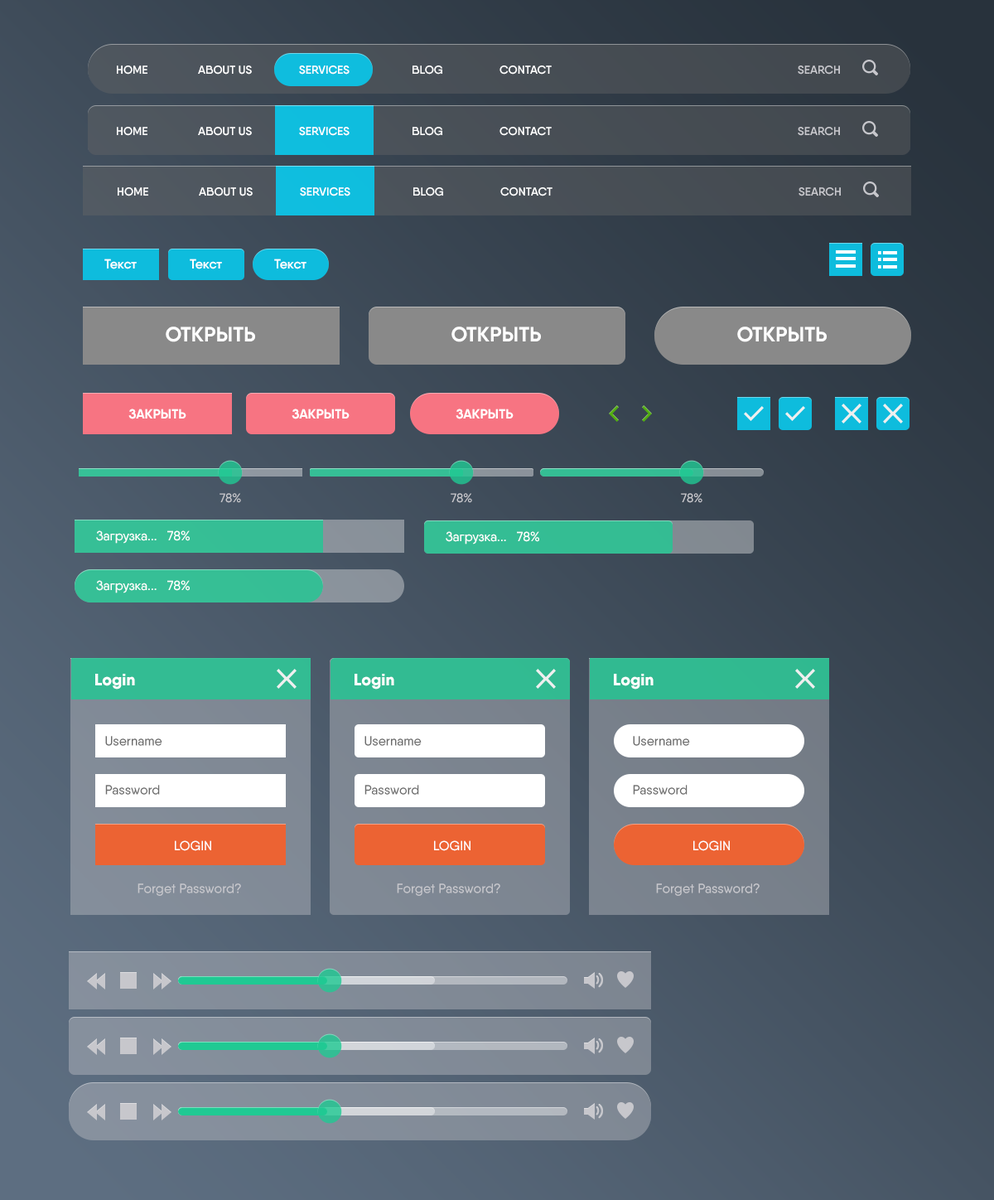
<style>
.page{position:relative;width:994px;height:1200px}
.page>*{position:absolute;margin:0}
.t1{font:11.6px "Qanelas-SemiBold";color:#ffffff;text-transform:uppercase}
.t2{font:11.6px "Qanelas-SemiBold";color:#c7c7cc;text-transform:uppercase}
.t3{font:13.3px "Qanelas-SemiBold";color:#ffffff}
.t4{font:20.7px "Qanelas-Bold";color:#ffffff;text-transform:uppercase}
.t5{font:13.3px "Qanelas-Bold";color:#ffffff;text-transform:uppercase}
.t6{font:12.4px "Qanelas-Medium";color:#c7c7cc}
.t7{font:13.3px "Qanelas-Medium";color:#ffffff}
.t8{font:16.6px "Qanelas-ExtraBold";color:#ffffff}
.t9{font:13.3px "Qanelas-Medium";color:#6c6c6c}
.t10{font:13.3px "Qanelas-Medium";color:#ffffff;text-transform:uppercase}
.t11{font:13.3px "Qanelas-Medium";color:#c7c7cc}
</style>
<div class="page">
<p class="t1" style="left:117px;top:65px;width:30px;height:10px">HOME</p>
<p class="t1" style="left:198px;top:65px;width:54px;height:10px">about us</p>
<p class="t1" style="left:299px;top:65px;width:51px;height:10px">services</p>
<p class="t1" style="left:413px;top:65px;width:29px;height:10px">blog</p>
<p class="t1" style="left:500px;top:65px;width:52px;height:10px">contact</p>
<p class="t2" style="left:798px;top:65px;width:42px;height:10px">search</p>
<p class="t1" style="left:117px;top:127px;width:30px;height:9px">HOME</p>
<p class="t1" style="left:198px;top:127px;width:54px;height:9px">about us</p>
<p class="t1" style="left:299px;top:127px;width:51px;height:9px">services</p>
<p class="t1" style="left:413px;top:127px;width:29px;height:9px">blog</p>
<p class="t1" style="left:500px;top:127px;width:52px;height:9px">contact</p>
<p class="t2" style="left:798px;top:127px;width:42px;height:9px">search</p>
<p class="t1" style="left:118px;top:187px;width:30px;height:9px">HOME</p>
<p class="t1" style="left:199px;top:187px;width:54px;height:9px">about us</p>
<p class="t1" style="left:300px;top:187px;width:50px;height:9px">services</p>
<p class="t1" style="left:413px;top:187px;width:30px;height:9px">blog</p>
<p class="t1" style="left:500px;top:187px;width:53px;height:9px">contact</p>
<p class="t2" style="left:799px;top:187px;width:42px;height:9px">search</p>
<p class="t3" style="left:104px;top:258px;width:33px;height:11px">Текст</p>
<p class="t3" style="left:190px;top:258px;width:32px;height:11px">Текст</p>
<p class="t3" style="left:274px;top:258px;width:33px;height:11px">Текст</p>
<p class="t4" style="left:166px;top:326px;width:89px;height:16px">открыть</p>
<p class="t4" style="left:451px;top:326px;width:90px;height:16px">открыть</p>
<p class="t4" style="left:737px;top:326px;width:90px;height:16px">открыть</p>
<p class="t5" style="left:128px;top:408px;width:58px;height:11px">закрыть</p>
<p class="t5" style="left:292px;top:408px;width:58px;height:11px">закрыть</p>
<p class="t5" style="left:456px;top:408px;width:58px;height:11px">закрыть</p>
<p class="t6" style="left:220px;top:493px;width:21px;height:10px">78%</p>
<p class="t6" style="left:451px;top:493px;width:21px;height:10px">78%</p>
<p class="t6" style="left:681px;top:493px;width:21px;height:10px">78%</p>
<p class="t7" style="left:96px;top:530px;width:94px;height:13px">Загрузка...   78%</p>
<p class="t7" style="left:446px;top:531px;width:93px;height:13px">Загрузка...   78%</p>
<p class="t7" style="left:96px;top:580px;width:94px;height:13px">Загрузка...   78%</p>
<p class="t8" style="left:95px;top:673px;width:40px;height:16px">Login</p>
<p class="t8" style="left:355px;top:673px;width:39px;height:16px">Login</p>
<p class="t8" style="left:614px;top:673px;width:40px;height:16px">Login</p>
<p class="t9" style="left:105px;top:736px;width:57px;height:10px">Username</p>
<p class="t9" style="left:364px;top:736px;width:58px;height:10px">Username</p>
<p class="t9" style="left:633px;top:736px;width:57px;height:10px">Username</p>
<p class="t9" style="left:105px;top:784px;width:55px;height:10px">Password</p>
<p class="t9" style="left:364px;top:784px;width:55px;height:10px">Password</p>
<p class="t9" style="left:633px;top:784px;width:55px;height:10px">Password</p>
<p class="t10" style="left:175px;top:840px;width:36px;height:11px">Login</p>
<p class="t10" style="left:434px;top:840px;width:37px;height:11px">Login</p>
<p class="t10" style="left:693px;top:840px;width:37px;height:11px">Login</p>
<p class="t11" style="left:138px;top:883px;width:103px;height:13px">Forget Password?</p>
<p class="t11" style="left:397px;top:883px;width:103px;height:13px">Forget Password?</p>
<p class="t11" style="left:656px;top:883px;width:104px;height:13px">Forget Password?</p>
</div>
